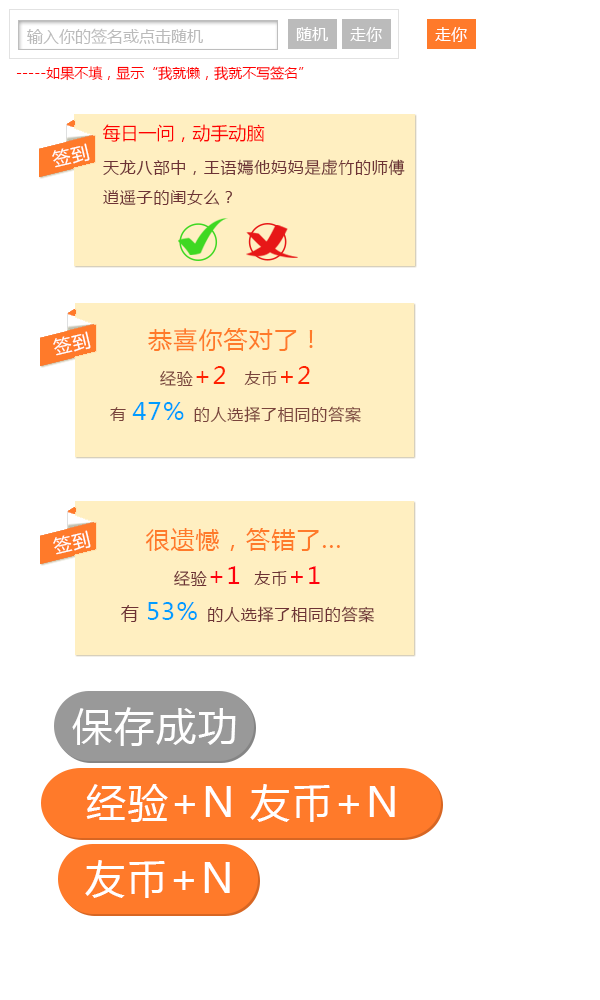
<style>
.page{position:relative;width:600px;height:1000px;background:#ffffff}
.page>*{position:absolute;margin:0}
.t1{font:16px "MicrosoftYaHei";color:#bbbbbb}
.t2{font:16px "MicrosoftYaHei";color:#ffffff}
.t3{font:14px "MicrosoftYaHei";color:#ff0000}
.t4{font:18px "MicrosoftYaHei";color:#ff0000}
.t5{font:18px "MicrosoftYaHei";letter-spacing:0.05em;color:#ffffff}
.t6{font:16px/30px "MicrosoftYaHei";letter-spacing:0.05em;color:#6d3235}
.t7{font:16px/36px "MicrosoftYaHei";letter-spacing:0.05em;color:#7a443c}
.t8{font:24px/36px "MicrosoftYaHei";letter-spacing:0.05em;color:#ff7a2a}
.t9{font:24px/36px "MicrosoftYaHei";letter-spacing:0.05em;color:#ff2100}
.t10{font:24px/36px "MicrosoftYaHei";letter-spacing:0.05em;color:#009cff}
.t11{font:16px/36px "MicrosoftYaHei";letter-spacing:0.05em;color:#6d3235}
.t12{font:24px/36px "MicrosoftYaHei";letter-spacing:0.05em;color:#fe000d}
.t13{font:24px/36px "MicrosoftYaHei";letter-spacing:0.05em;color:#ff000d}
.t14{font:18px/36px "MicrosoftYaHei";letter-spacing:0.05em;color:#6d3235}
.t15{font:40px "MicrosoftYaHei";letter-spacing:0.05em;color:#ffffff}
</style>
<div class="page">
<p class="t1" style="left:27px;top:28px;width:176px;height:16px">输入你的签名或点击随机</p>
<p class="t2" style="left:296px;top:27px;width:32px;height:14px">随机</p>
<p class="t2" style="left:350px;top:27px;width:32px;height:15px">走你</p>
<p class="t2" style="left:435px;top:27px;width:32px;height:15px">走你</p>
<p class="t3" style="left:16px;top:66px;width:288px;height:15px">-----如果不填，显示“我就懒，我就不写签名”</p>
<p class="t4" style="left:103px;top:124px;width:162px;height:18px">每日一问，动手动脑</p>
<p class="t5" style="left:52px;top:143px;width:38px;height:25px;rotate:-13deg">签到</p>
<p class="t6" style="left:103px;top:159px;width:302px;height:46px">天龙八部中，王语嫣他妈妈是虚竹的师傅<br>逍遥子的闺女么？</p>
<p class="t7" style="left:110px;top:328px;width:251px;height:95px;text-align:center"><span class="t8">恭喜你答对了！<br></span>经验<span class="t9">+2  </span>友币<span class="t9">+2<br></span>有 <span class="t10">47% </span>的人选择了相同的答案</p>
<p class="t5" style="left:53px;top:331px;width:38px;height:25px;rotate:-13deg">签到</p>
<p class="t5" style="left:53px;top:530px;width:38px;height:25px;rotate:-13deg">签到</p>
<p class="t8" style="left:121px;top:528px;width:253px;height:95px;text-align:center">很遗憾，答错了... <br><span class="t11">经验</span><span class="t12">+1  </span><span class="t11">友币</span><span class="t13">+1<br></span><span class="t14">有 </span><span class="t10">53% </span><span class="t11">的人选择了相同的答案</span></p>
<p class="t15" style="left:72px;top:707px;width:164px;height:39px">保存成功</p>
<p class="t15" style="left:86px;top:784px;width:309px;height:38px">经验+N 友币+N</p>
<p class="t15" style="left:85px;top:860px;width:145px;height:38px">友币+N</p>
</div>
